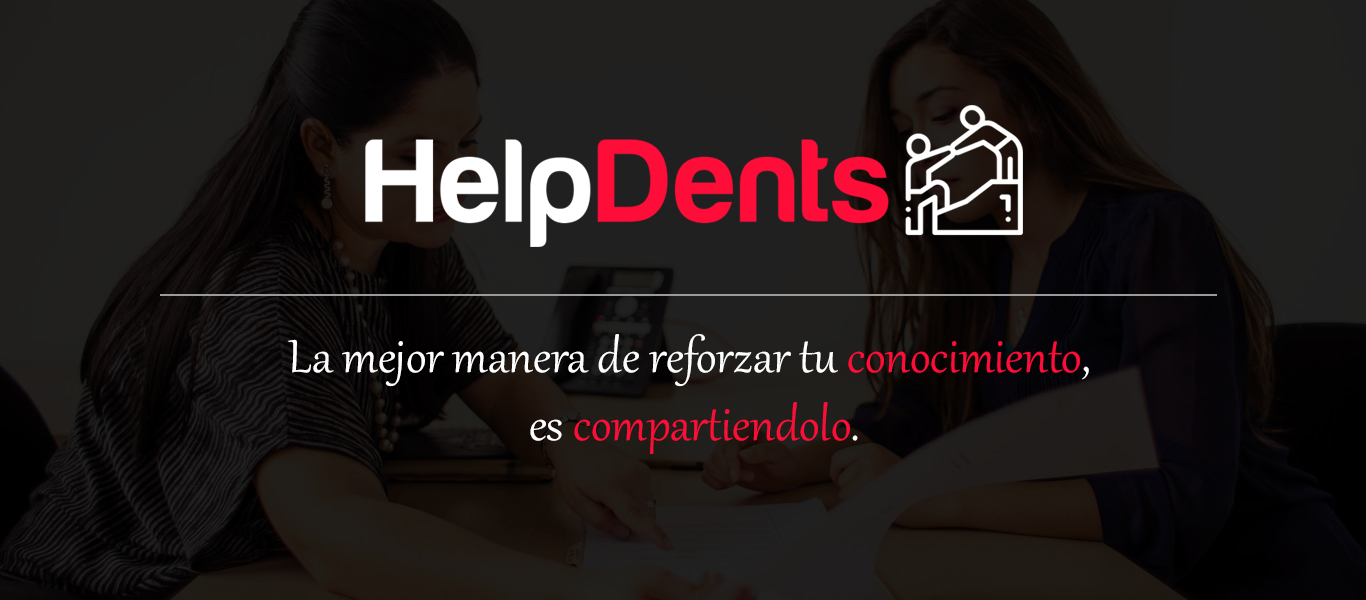
<style>
.page{position:relative;width:1366px;height:600px}
.page>*{position:absolute;margin:0}
.t1{font:57.3px "Gabriola";color:#ffffff}
.t2{font:57.3px "Gabriola";color:#ff0d39}
</style>
<div class="page">
<p class="t1" style="left:288px;top:334px;width:801px;height:120px;text-align:center">La mejor manera de reforzar tu <span class="t2">conocimiento</span>, <br>es <span class="t2">compartiendolo</span>.</p>
</div>
